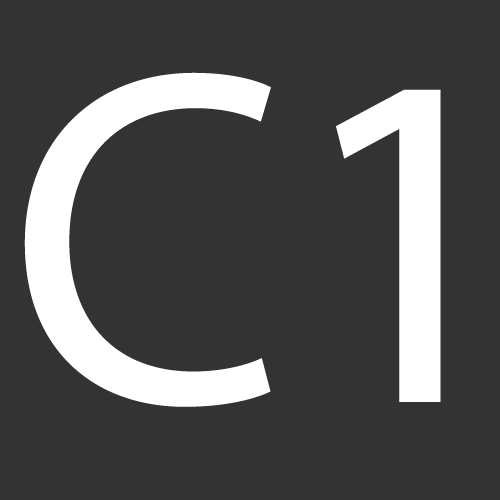
<style>
.page{position:relative;width:500px;height:500px;background:#333333}
.page>*{position:absolute;margin:0}
.t1{font:480.2px "MyriadPro-Regular";color:#ffffff}
</style>
<div class="page">
<p class="t1" style="left:24px;top:72px;width:417px;height:335px">C1</p>
</div>
